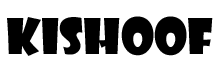
<style>
.page{position:relative;width:220px;height:77px;background:#ffffff}
.page>*{position:absolute;margin:0}
.t1{font:48px "ShowcardGothic-Reg";color:#000000}
</style>
<div class="page">
<p class="t1" style="left:7px;top:16px;width:206px;height:40px">KISHOOF</p>
</div>
